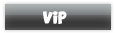
<style>
.page{position:relative;width:115px;height:33px}
.page>*{position:absolute;margin:0}
.t1{font:8px "ComixLoud";color:#ffffff}
</style>
<div class="page">
<p class="t1" style="left:43px;top:11px;width:24px;height:13px">VIP</p>
</div>
